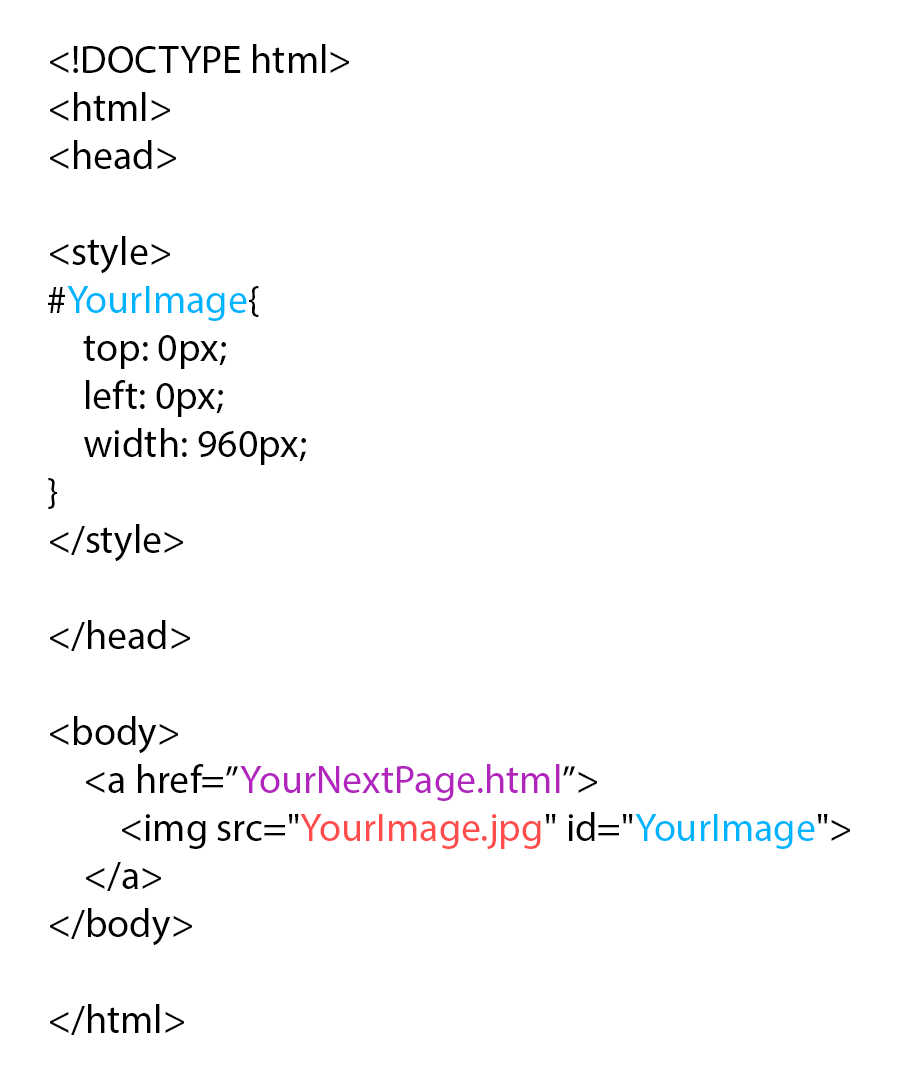
<style>
.page{position:relative;width:900px;height:1080px;background:#ffffff}
.page>*{position:absolute;margin:0}
.t1{font:40px "MyriadPro-Regular";color:#000000}
.t2{font:40px "MyriadPro-Regular";color:#00b4ff}
.t3{font:40px "MyriadPro-Regular";color:#b125be}
.t4{font:40px "MyriadPro-Regular";color:#ff4c4c}
</style>
<div class="page">
<p class="t1" style="left:48px;top:44px;width:802px;height:991px">&lt;!DOCTYPE html&gt;<br>&lt;html&gt;<br>&lt;head&gt;<br><br>&lt;style&gt;<br>#<span class="t2">YourImage</span>{<br> top: 0px;<br> left: 0px;<br> width: 960px;<br>}<br>&lt;/style&gt;<br><br>&lt;/head&gt;<br><br>&lt;body&gt;<br> &lt;a href=”<span class="t3">YourNextPage.html</span>”&gt;<br>  &lt;img src="<span class="t4">YourImage.jpg</span>" id="<span class="t2">YourImage</span>"&gt;<br> &lt;/a&gt; <br>&lt;/body&gt;<br><br>&lt;/html&gt;</p>
</div>
